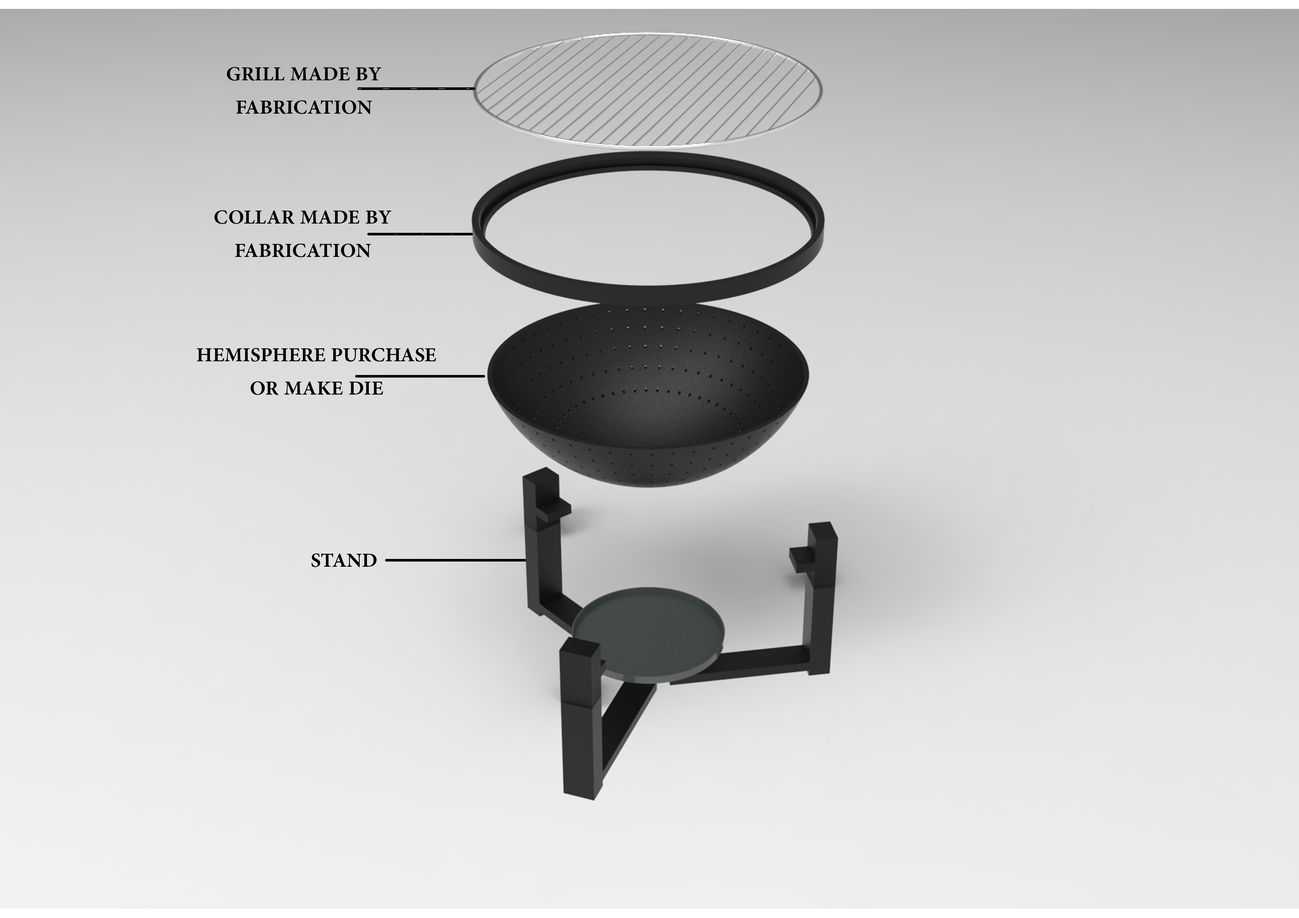
<style>
.page{position:relative;width:1299px;height:918px}
.page>*{position:absolute;margin:0}
.t1{font:27.8px "AdobeArabic-Bold";color:#000000}
</style>
<div class="page">
<p class="t1" style="left:227px;top:67px;width:154px;height:47px">GRILL MADE BY FABRICATION</p>
<p class="t1" style="left:214px;top:210px;width:177px;height:47px">COLLAR MADE BY FABRICATION</p>
<p class="t1" style="left:197px;top:348px;width:239px;height:47px">HEMISPHERE PURCHASE OR MAKE DIE</p>
<p class="t1" style="left:311px;top:553px;width:66px;height:14px">STAND</p>
</div>
